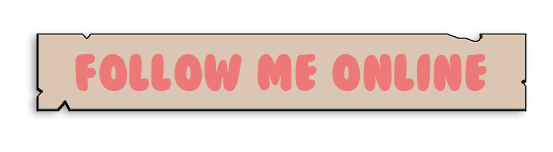
<style>
.page{position:relative;width:553px;height:152px;background:#ffffff}
.page>*{position:absolute;margin:0}
.t1{font:48px "BubbleGum";color:#ec7878}
</style>
<div class="page">
<p class="t1" style="left:75px;top:54px;width:412px;height:37px">Follow me ONLINE</p>
</div>
